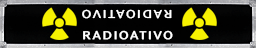
<style>
.page{position:relative;width:256px;height:48px;background:#010101}
.page>*{position:absolute;margin:0}
.t1{font:11.7px "CorporateS";letter-spacing:0.1em;color:#ffffff;font-weight:bold;scale:1.25 1}
</style>
<div class="page">
<p class="t1" style="left:82px;top:9px;width:90px;height:10px;rotate:180deg">RADIOATIVO</p>
<p class="t1" style="left:83px;top:30px;width:90px;height:10px">RADIOATIVO</p>
</div>
